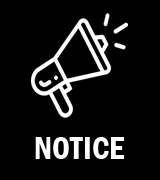
<style>
.page{position:relative;width:160px;height:180px;background:#000000}
.page>*{position:absolute;margin:0}
.t1{font:32px "FranklinGothic-DemiCond";color:#ffffff}
</style>
<div class="page">
<p class="t1" style="left:35px;top:137px;width:89px;height:22px">NOTICE</p>
</div>
